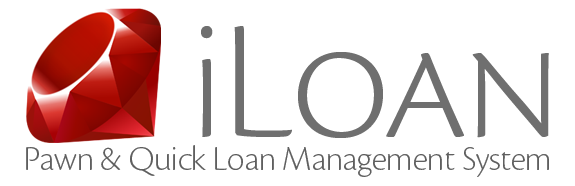
<style>
.page{position:relative;width:575px;height:186px;background:#ffffff}
.page>*{position:absolute;margin:0}
.t1{font:174.8px "CronosPro-LtDisp";color:#6f6f6f;font-variant:small-caps}
.t2{font:174.8px "CronosPro-LtDisp";color:#6f6f6f}
.t3{font:36px "CronosPro-LtDisp";color:#5f5f5f}
</style>
<div class="page">
<p class="t1" style="left:201px;top:26px;width:348px;height:112px"><span class="t2">i</span>Loan</p>
<p class="t3" style="left:26px;top:145px;width:523px;height:32px">Pawn &amp; Quick Loan Management System</p>
</div>
